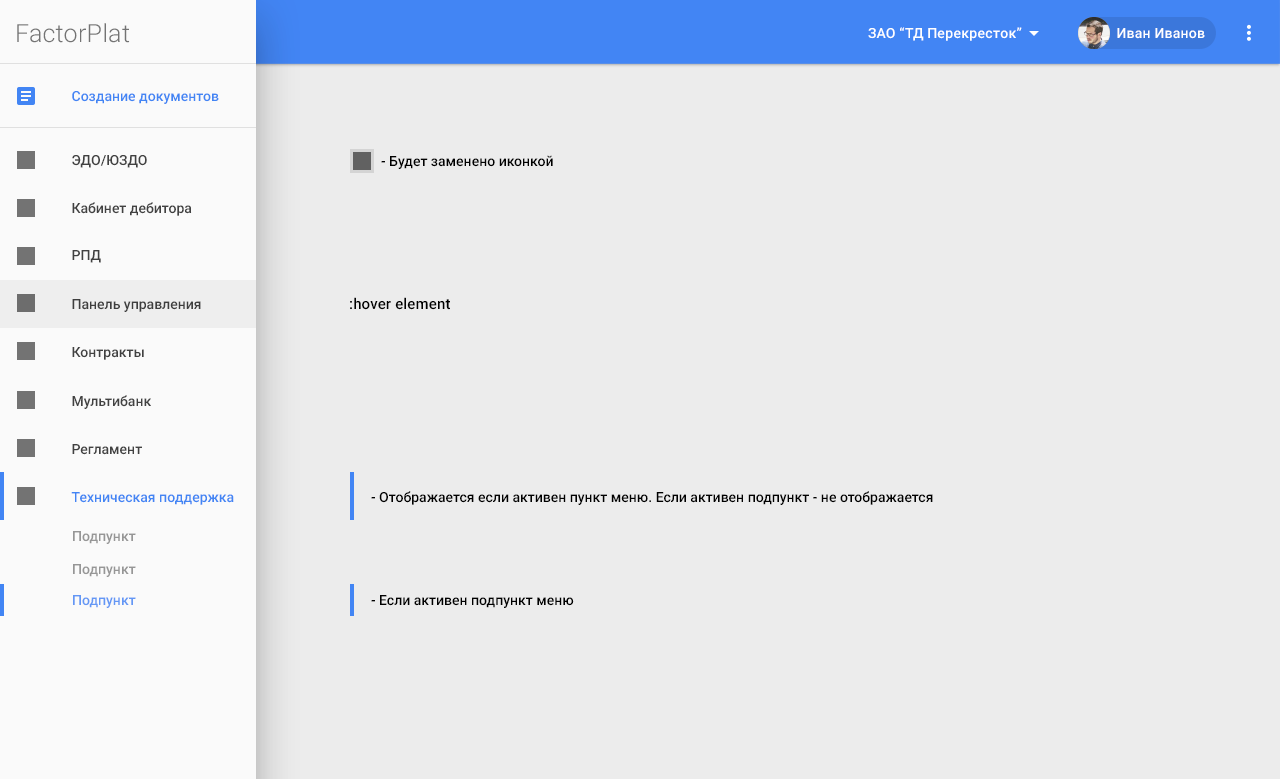
<style>
.page{position:relative;width:1280px;height:779px;background:#ececec}
.page>*{position:absolute;margin:0}
.t1{font:25px "Roboto-Light";letter-spacing:0.01em;color:#737373}
.t2{font:14px "Roboto-Medium";color:#4285f4}
.t3{font:14px "Roboto-Medium";color:#414141}
.t4{font:14px "Roboto-Medium";color:#000000}
.t5{font:14px "Roboto-Medium";color:#3e3e3e}
.t6{font:15px "Roboto-Medium";letter-spacing:0.01em;color:#000000}
.t7{font:14px "Roboto-Medium";color:#969696}
.t8{font:14px "Roboto-Medium";color:#6397f5}
</style>
<div class="page">
<p class="t1" style="left:17px;top:23px;width:113px;height:20px">FactorPlat</p>
<p class="t2" style="left:72px;top:91px;width:147px;height:13px">Создание документов</p>
<p class="t3" style="left:72px;top:155px;width:75px;height:13px">ЭДО/ЮЗДО</p>
<p class="t4" style="left:381px;top:155px;width:172px;height:14px">- Будет заменено иконкой</p>
<p class="t3" style="left:72px;top:202px;width:120px;height:14px">Кабинет дебитора</p>
<p class="t3" style="left:72px;top:250px;width:29px;height:13px">РПД</p>
<p class="t5" style="left:72px;top:299px;width:129px;height:13px">Панель управления</p>
<p class="t6" style="left:350px;top:297px;width:100px;height:13px">:hover element</p>
<p class="t3" style="left:72px;top:347px;width:72px;height:13px">Контракты</p>
<p class="t3" style="left:72px;top:395px;width:79px;height:14px">Мультибанк</p>
<p class="t3" style="left:72px;top:444px;width:70px;height:11px">Регламент</p>
<p class="t2" style="left:71px;top:492px;width:163px;height:13px">Техническая поддержка</p>
<p class="t4" style="left:371px;top:491px;width:562px;height:14px">- Отображается если активен пункт меню. Если активен подпункт - не отображается</p>
<p class="t7" style="left:73px;top:531px;width:63px;height:13px">Подпункт</p>
<p class="t7" style="left:73px;top:564px;width:63px;height:13px">Подпункт</p>
<p class="t8" style="left:73px;top:595px;width:63px;height:13px">Подпункт</p>
<p class="t4" style="left:371px;top:595px;width:203px;height:13px">- Если активен подпункт меню</p>
</div>
